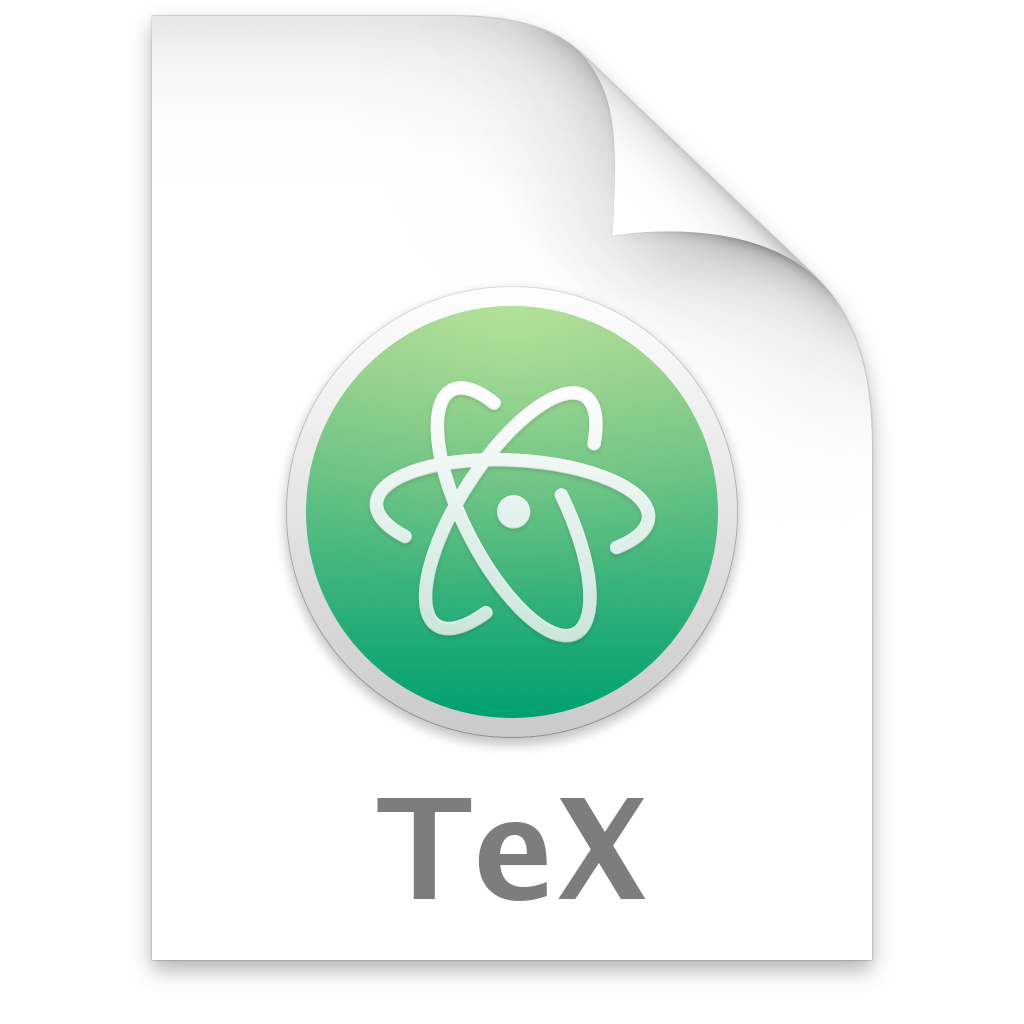
<style>
.page{position:relative;width:1024px;height:1024px;background:#ffffff}
.page>*{position:absolute;margin:0}
.t1{font:140px "LucidaGrande-Bold";color:#7d7d7d}
</style>
<div class="page">
<p class="t1" style="left:377px;top:798px;width:269px;height:103px">TeX</p>
</div>
